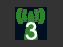
<style>
.page{position:relative;width:63px;height:47px;background:#333333}
.page>*{position:absolute;margin:0}
.t1{font:24px "ArialMT";color:#ffffff}
</style>
<div class="page">
<p class="t1" style="left:25px;top:22px;width:13px;height:18px">3</p>
</div>
